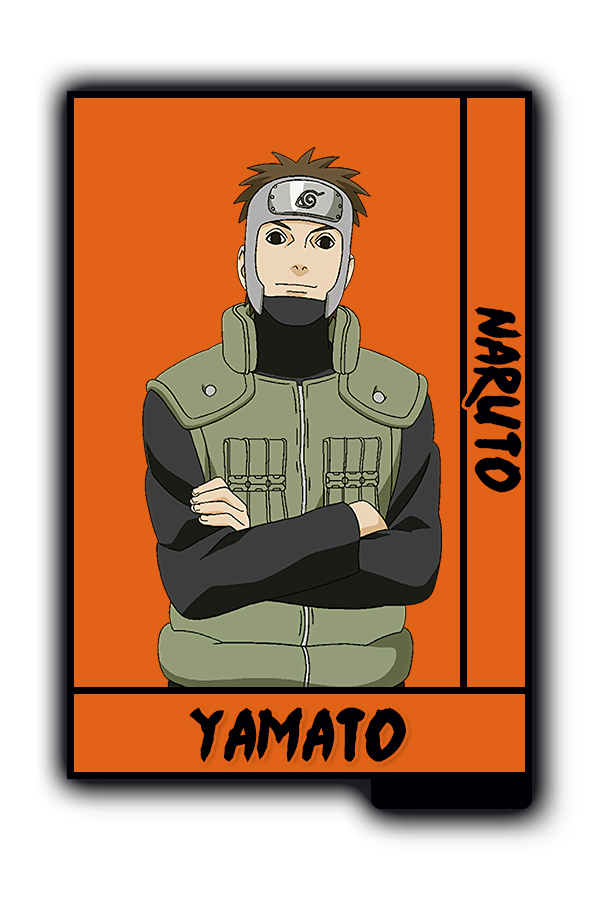
<style>
.page{position:relative;width:600px;height:900px;background:#e26317}
.page>*{position:absolute;margin:0}
.t1{font:52px "Ninja-Naruto";color:#010005}
.t2{font:60.3px "Ninja-Naruto";color:#010005}
</style>
<div class="page">
<p class="t1" style="left:464px;top:307px;width:59px;height:186px;rotate:90deg">Naruto</p>
<p class="t2" style="left:189px;top:707px;width:217px;height:56px">Yamato</p>
</div>
